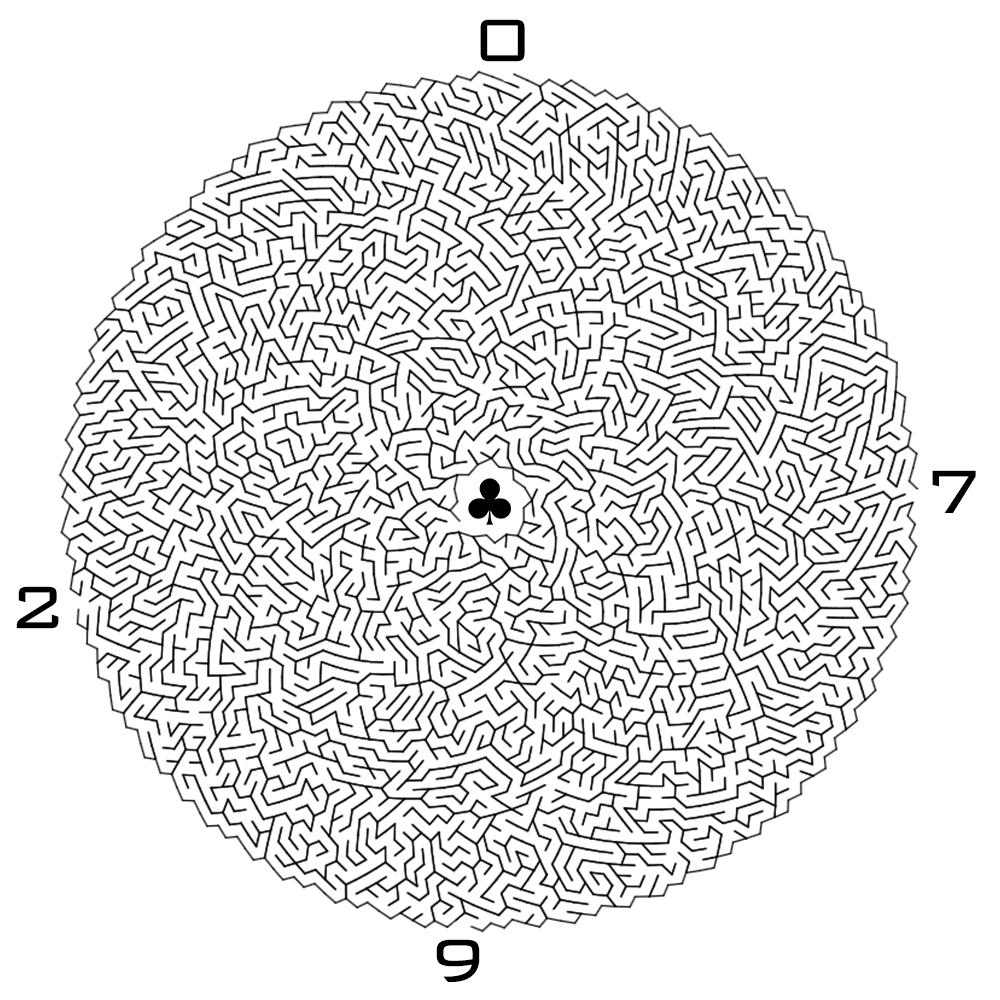
<style>
.page{position:relative;width:1000px;height:1000px;background:#ffffff}
.page>*{position:absolute;margin:0}
.t1{font:80px "BankGothic-Light";color:#000000}
</style>
<div class="page">
<p class="t1" style="left:480px;top:19px;width:45px;height:43px">0</p>
<p class="t1" style="left:932px;top:470px;width:44px;height:43px">7</p>
<p class="t1" style="left:16px;top:586px;width:43px;height:43px">2</p>
<p class="t1" style="left:436px;top:939px;width:44px;height:43px">9</p>
</div>
